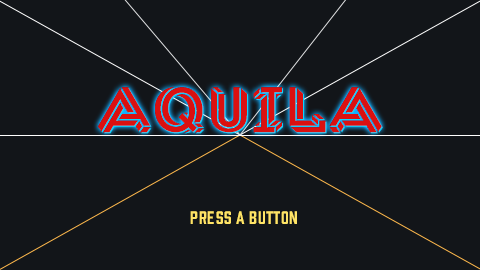
<style>
.page{position:relative;width:480px;height:270px;background:#121519}
.page>*{position:absolute;margin:0}
.t1{font:62.5px "Macula-Solid";color:#db1010}
.t2{font:16.7px "Prohibition-Regular";letter-spacing:0.02em;color:#ffe466}
.t3{font:16.7px "Prohibition-Regular";letter-spacing:0.06em;color:#ffe466}
</style>
<div class="page">
<p class="t1" style="left:98px;top:87px;width:284px;height:46px">Aquila</p>
<p class="t1" style="left:99px;top:88px;width:284px;height:46px">Aquila</p>
<p class="t2" style="left:190px;top:211px;width:107px;height:13px"><span class="t3">PRESS </span>A BUTTON</p>
</div>
